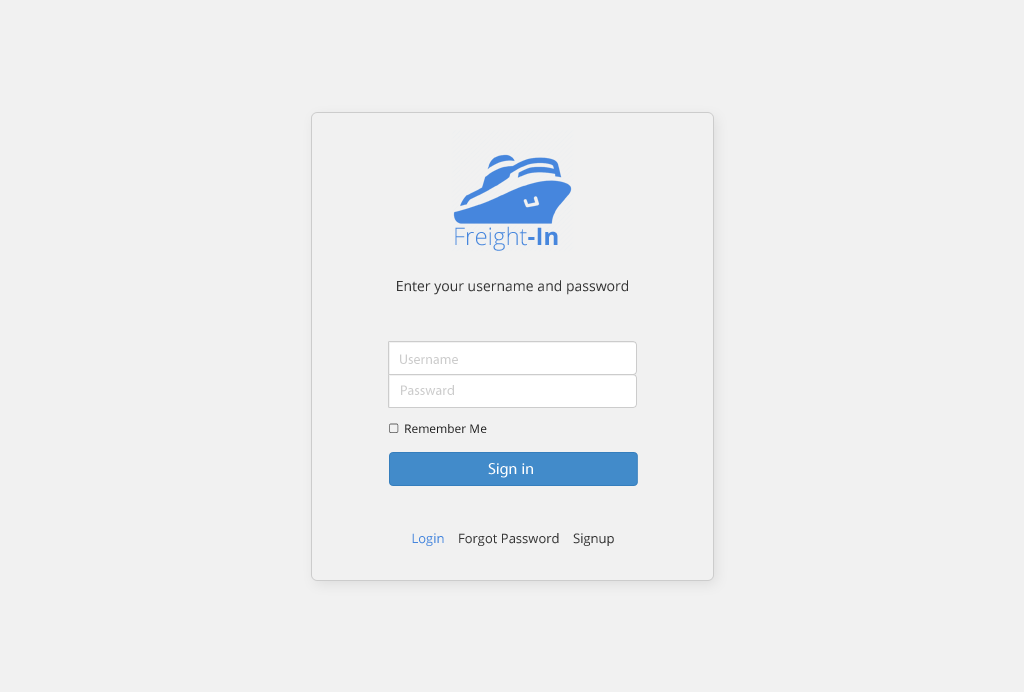
<style>
.page{position:relative;width:1024px;height:692px;background:#f1f1f1}
.page>*{position:absolute;margin:0}
.t1{font:24px "OpenSans-Light";color:#4686dd}
.t2{font:24px "OpenSans-Bold";color:#4686dd}
.t3{font:14px "OpenSans";color:#343434}
.t4{font:14px "MyriadPro-Regular";color:#cccccc}
.t5{font:12px "OpenSans";color:#1c1c1c}
.t6{font:16px "MyriadPro-Regular";color:#ffffff}
.t7{font:13px "OpenSans";color:#343434}
.t8{font:13px "OpenSans";color:#4686dd}
</style>
<div class="page">
<p class="t1" style="left:455px;top:226px;width:103px;height:25px">Freight<span class="t2">-In</span></p>
<p class="t3" style="left:397px;top:280px;width:231px;height:15px">Enter your username and password</p>
<p class="t4" style="left:400px;top:354px;width:58px;height:10px">Username</p>
<p class="t4" style="left:401px;top:385px;width:53px;height:10px">Passward</p>
<p class="t5" style="left:405px;top:424px;width:82px;height:9px">Remember Me</p>
<p class="t6" style="left:488px;top:463px;width:45px;height:15px">Sign in</p>
<p class="t7" style="left:412px;top:533px;width:202px;height:13px"><span class="t8">    Login </span>   Forgot Password    Signup</p>
</div>
